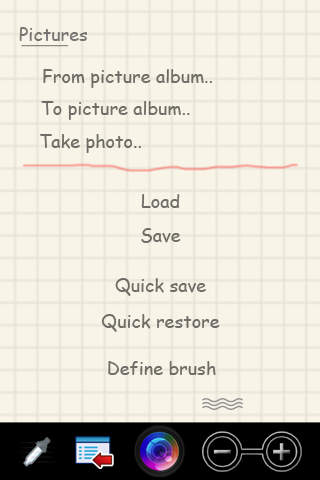
<style>
.page{position:relative;width:320px;height:480px;background:#f8f4e7}
.page>*{position:absolute;margin:0}
.t1{font:18px "ComicSansMS";color:#777573}
.t2{font:18px "ComicSansMS";color:#706e68}
.t3{font:18px "ComicSansMS";color:#6f6d67}
</style>
<div class="page">
<p class="t1" style="left:19px;top:27px;width:68px;height:14px">Pictures</p>
<p class="t2" style="left:43px;top:69px;width:169px;height:19px">From picture album..</p>
<p class="t2" style="left:41px;top:101px;width:149px;height:19px">To picture album..</p>
<p class="t2" style="left:40px;top:134px;width:101px;height:19px">Take photo..</p>
<p class="t2" style="left:141px;top:194px;width:39px;height:14px">Load</p>
<p class="t3" style="left:141px;top:228px;width:40px;height:15px">Save</p>
<p class="t2" style="left:115px;top:278px;width:91px;height:18px">Quick save</p>
<p class="t2" style="left:101px;top:314px;width:119px;height:18px">Quick restore</p>
<p class="t2" style="left:108px;top:361px;width:108px;height:14px">Define brush</p>
</div>
